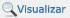
<style>
.page{position:relative;width:70px;height:18px;background:#eff0f1}
.page>*{position:absolute;margin:0}
.t1{font:10px "Verdana";color:#336ca1}
</style>
<div class="page">
<p class="t1" style="left:17px;top:5px;width:49px;height:8px">Visualizar</p>
</div>
